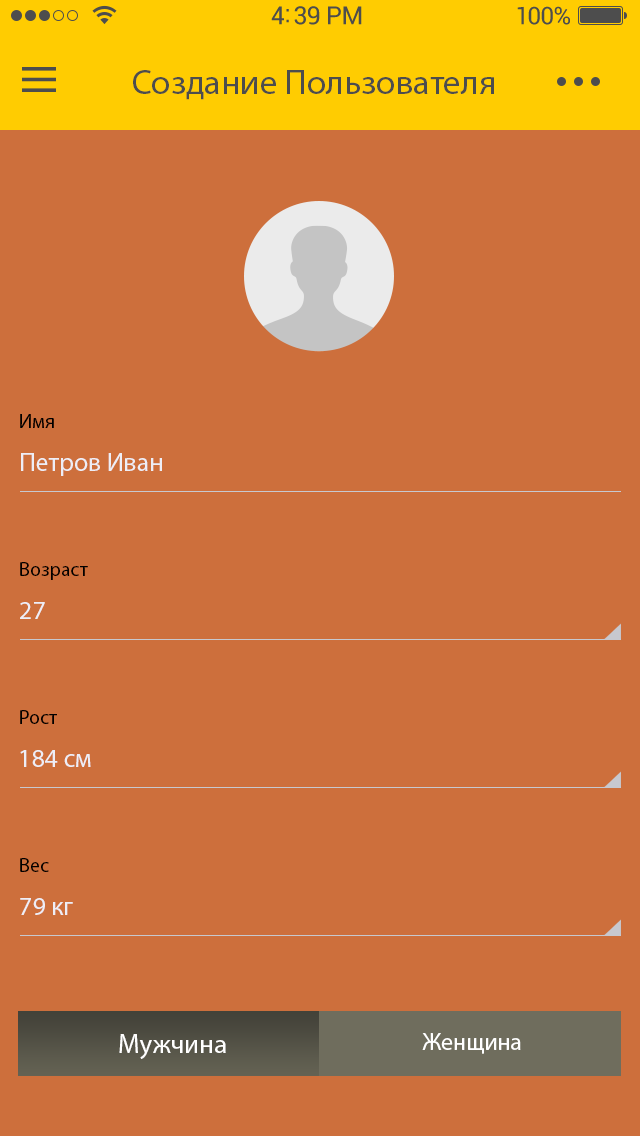
<style>
.page{position:relative;width:640px;height:1136px;background:#cd6f3c}
.page>*{position:absolute;margin:0}
.t1{font:35px "MyriadPro-Regular";color:#4d4d4d}
.t2{font:20px "MyriadPro-Regular";color:#000000}
.t3{font:26px "MyriadPro-Regular";color:#eeeef6}
.t4{font:27px "MyriadPro-Regular";color:#ffffff}
.t5{font:24px "MyriadPro-Regular";color:#ffffff}
</style>
<div class="page">
<p class="t1" style="left:133px;top:70px;width:361px;height:30px">Создание Пользователя</p>
<p class="t2" style="left:20px;top:414px;width:34px;height:14px">Имя</p>
<p class="t3" style="left:21px;top:453px;width:141px;height:23px">Петров Иван</p>
<p class="t2" style="left:20px;top:562px;width:68px;height:18px">Возраст</p>
<p class="t3" style="left:20px;top:602px;width:25px;height:17px">27</p>
<p class="t2" style="left:20px;top:710px;width:37px;height:14px">Рост</p>
<p class="t3" style="left:20px;top:750px;width:71px;height:17px">184 см</p>
<p class="t2" style="left:20px;top:858px;width:29px;height:14px">Вес</p>
<p class="t3" style="left:20px;top:898px;width:53px;height:17px">79 кг</p>
<p class="t4" style="left:119px;top:1034px;width:107px;height:25px">Мужчина</p>
<p class="t5" style="left:422px;top:1033px;width:99px;height:21px">Женщина</p>
</div>
